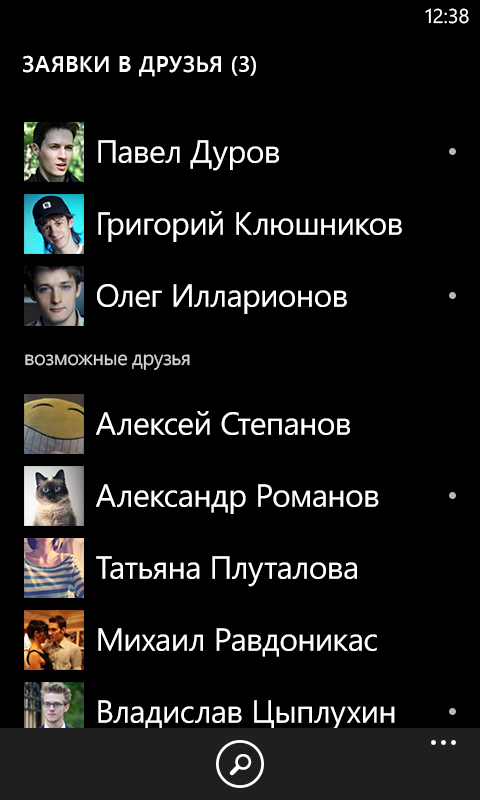
<style>
.page{position:relative;width:480px;height:800px;background:#000000}
.page>*{position:absolute;margin:0}
.t1{font:20px "SegoeWP";color:#ffffff}
.t2{font:22.7px "SegoeWP-Semibold";letter-spacing:0.025em;color:#ffffff;text-transform:uppercase}
.t3{font:32px "SegoeWP";letter-spacing:-0.01em;color:#ffffff}
</style>
<div class="page">
<p class="t1" style="left:425px;top:8px;width:44px;height:16px">12:38</p>
<p class="t2" style="left:23px;top:55px;width:233px;height:22px">Заявки в друзья (3)</p>
<p class="t3" style="left:98px;top:140px;width:181px;height:31px">Павел Дуров</p>
<p class="t3" style="left:98px;top:211px;width:304px;height:31px">Григорий Клюшников</p>
<p class="t3" style="left:97px;top:284px;width:250px;height:30px">Олег Илларионов</p>
<p class="t3" style="left:96px;top:411px;width:254px;height:25px">Алексей Степанов</p>
<p class="t3" style="left:96px;top:484px;width:283px;height:30px">Александр Романов</p>
<p class="t3" style="left:96px;top:556px;width:261px;height:31px">Татьяна Плуталова</p>
<p class="t3" style="left:98px;top:628px;width:279px;height:29px">Михаил Равдоникас</p>
<p class="t3" style="left:98px;top:700px;width:297px;height:31px">Владислав Цыплухин</p>
<p class="t3" style="left:96px;top:771px;width:227px;height:31px">Андрей Рогозов</p>
</div>
